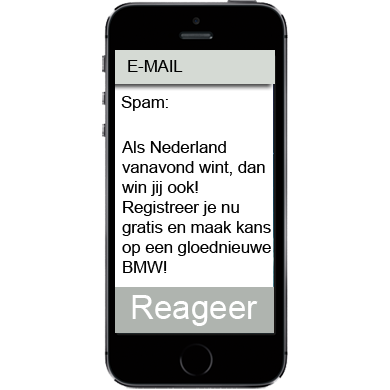
<style>
.page{position:relative;width:390px;height:390px;background:#ffffff}
.page>*{position:absolute;margin:0}
.t1{font:16.7px "ArialMT";color:#000000}
.t2{font:33.3px "ArialMT";color:#ffffff}
</style>
<div class="page">
<p class="t1" style="left:128px;top:60px;width:55px;height:12px">E-MAIL</p>
<p class="t1" style="left:121px;top:96px;width:47px;height:15px">Spam:</p>
<p class="t1" style="left:122px;top:141px;width:149px;height:132px">Als Nederland <br>vanavond wint, dan<br>win jij ook!<br>Registreer je nu<br>gratis en maak kans <br>op een gloednieuwe<br>BMW!</p>
<p class="t2" style="left:132px;top:295px;width:126px;height:31px">Reageer</p>
</div>
